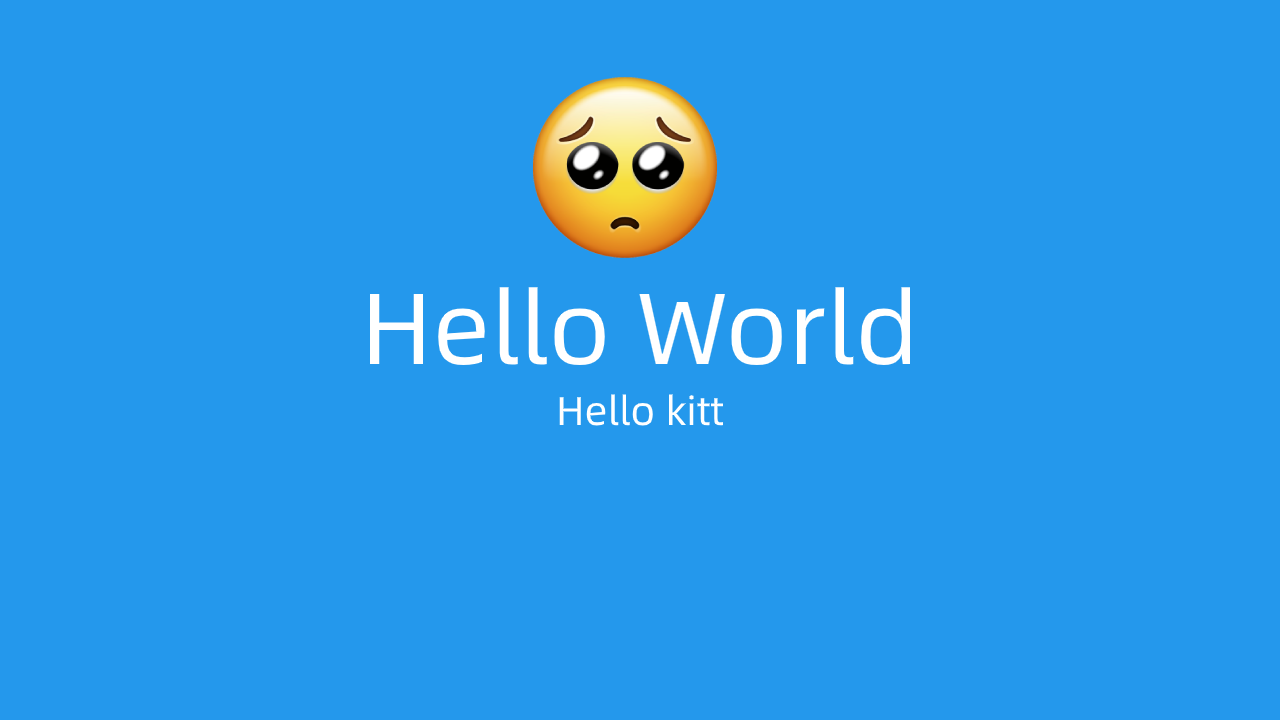
<style>
.page{position:relative;width:1280px;height:720px;background:#2498ec}
.page>*{position:absolute;margin:0}
.t1{font:101px "AlibabaPuHuiTi-Regular";color:#ffffff}
.t2{font:40px "AlibabaPuHuiTi-Regular";color:#ffffff}
</style>
<div class="page">
<p class="t1" style="left:370px;top:287px;width:541px;height:79px">Hello World</p>
<p class="t2" style="left:559px;top:394px;width:165px;height:32px">Hello kitt</p>
</div>
